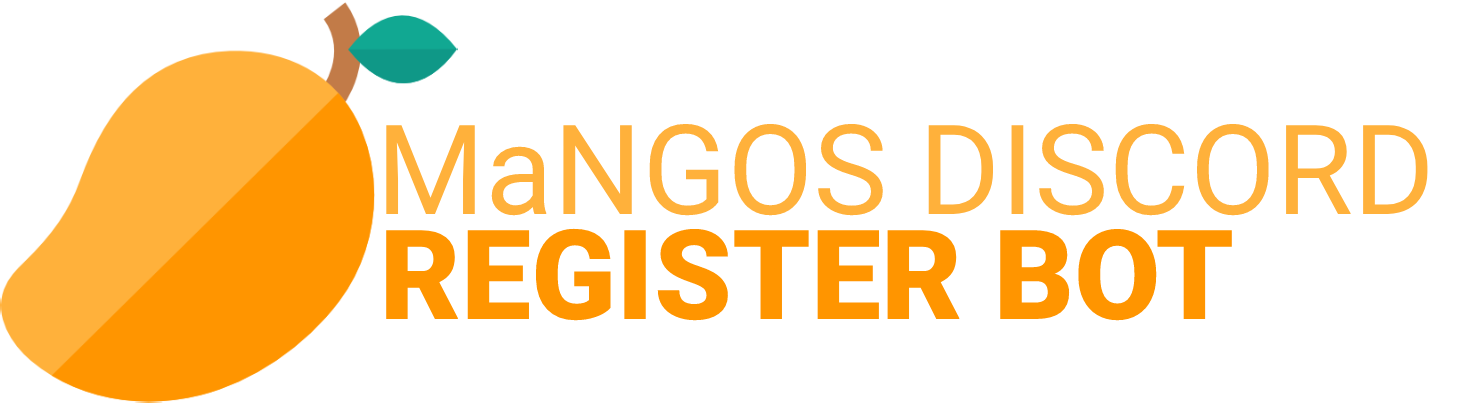
<style>
.page{position:relative;width:1458px;height:407px;background:#ffffff}
.page>*{position:absolute;margin:0}
.t1{font:125px "Roboto-Regular";color:#ffb13b}
.t2{font:125px "Roboto-Black";color:#ff9500}
</style>
<div class="page">
<p class="t1" style="left:386px;top:123px;width:1042px;height:93px">MaNGOS DISCORD</p>
<p class="t2" style="left:386px;top:228px;width:846px;height:93px">REGISTER BOT</p>
</div>
